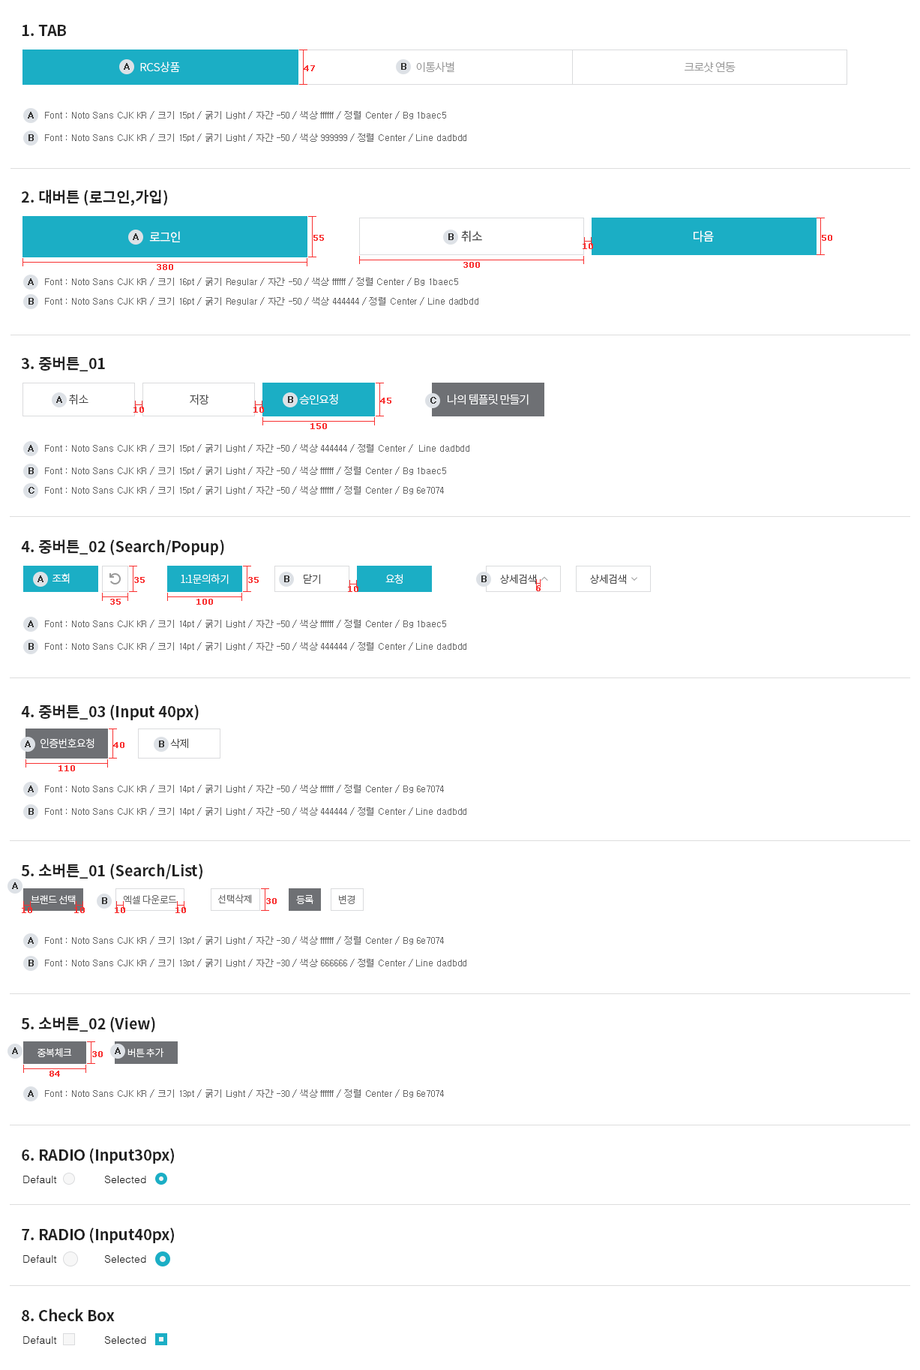
<style>
.page{position:relative;width:920px;height:1370px;background:#ffffff}
.page>*{position:absolute;margin:0}
.t1{font:15px "NotoSansCJKkr-Bold";color:#222222;text-transform:uppercase}
.t2{font:11.3px "NotoSansCJKkr-Light";color:#ffffff}
.t3{font:11.3px "NotoSansCJKkr-Light";letter-spacing:-0.05em;color:#ffffff}
.t4{font:8.3px "Verdana";color:#f83030;font-weight:bold}
.t5{font:11.3px "NotoSansCJKkr-Light";letter-spacing:-0.05em;color:#999999}
.t6{font:9px "Dotum";color:#323232;font-weight:bold}
.t7{font:9px "Dotum";color:#666666}
.t8{font:12px "NotoSansCJKkr-Regular";letter-spacing:-0.05em;color:#ffffff;text-transform:uppercase}
.t9{font:12px "NotoSansCJKkr-Regular";letter-spacing:-0.05em;color:#444444;text-transform:uppercase}
.t10{font:11.3px "NotoSansCJKkr-Light";letter-spacing:-0.05em;color:#444444}
.t11{font:15px "NotoSansCJKkr-Bold";color:#222222}
.t12{font:10.5px "NotoSansCJKkr-Light";letter-spacing:-0.05em;color:#ffffff}
.t13{font:10.5px "NotoSansCJKkr-Light";letter-spacing:-0.05em;color:#444444;text-transform:uppercase}
.t14{font:10.5px "NotoSansCJKkr-Light";letter-spacing:-0.05em;color:#ffffff;text-transform:uppercase}
.t15{font:10.5px "NotoSansCJKkr-Light";letter-spacing:-0.03em;color:#444444}
.t16{font:10.5px "NotoSansCJKkr-Light";letter-spacing:-0.05em;color:#444444}
.t17{font:9.8px "NotoSansCJKkr-Light";letter-spacing:-0.03em;color:#666666}
.t18{font:9.8px "NotoSansCJKkr-Light";letter-spacing:-0.03em;color:#ffffff}
.t19{font:10.5px "Dotum";color:#222222}
</style>
<div class="page">
<p class="t1" style="left:22px;top:25px;width:44px;height:11px">1. TAB</p>
<p class="t2" style="left:140px;top:62px;width:40px;height:10px">RCS<span class="t3">상품</span></p>
<p class="t4" style="left:304px;top:65px;width:11px;height:6px">47</p>
<p class="t5" style="left:416px;top:62px;width:39px;height:10px">이통사별</p>
<p class="t5" style="left:685px;top:62px;width:51px;height:10px">크로샷 연동</p>
<p class="t6" style="left:28px;top:112px;width:6px;height:7px">A</p>
<p class="t7" style="left:45px;top:111px;width:401px;height:8px">Font : Noto Sans CJK KR / 크기 15pt / 굵기 Light / 자간 -50 / 색상 ffffff / 정렬 Center / Bg 1baec5</p>
<p class="t6" style="left:29px;top:134px;width:5px;height:7px">B</p>
<p class="t7" style="left:45px;top:134px;width:422px;height:8px">Font : Noto Sans CJK KR / 크기 15pt / 굵기 Light / 자간 -50 / 색상 999999 / 정렬 Center / Line dadbdd</p>
<p class="t1" style="left:21px;top:189px;width:146px;height:17px">2. 대버튼 (로그인,가입)</p>
<p class="t8" style="left:149px;top:231px;width:31px;height:11px">로그인</p>
<p class="t9" style="left:461px;top:230px;width:21px;height:12px">취소</p>
<p class="t8" style="left:694px;top:230px;width:20px;height:12px">다음</p>
<p class="t4" style="left:314px;top:235px;width:10px;height:6px">55</p>
<p class="t4" style="left:583px;top:243px;width:10px;height:6px">10</p>
<p class="t4" style="left:822px;top:235px;width:11px;height:6px">50</p>
<p class="t4" style="left:157px;top:264px;width:16px;height:6px">380</p>
<p class="t4" style="left:464px;top:262px;width:16px;height:6px">300</p>
<p class="t6" style="left:28px;top:278px;width:6px;height:7px">A</p>
<p class="t7" style="left:45px;top:278px;width:413px;height:8px">Font : Noto Sans CJK KR / 크기 16pt / 굵기 Regular / 자간 -50 / 색상 ffffff / 정렬 Center / Bg 1baec5</p>
<p class="t6" style="left:29px;top:298px;width:5px;height:7px">B</p>
<p class="t7" style="left:45px;top:297px;width:434px;height:8px">Font : Noto Sans CJK KR / 크기 16pt / 굵기 Regular / 자간 -50 / 색상 444444 / 정렬 Center / Line dadbdd</p>
<p class="t1" style="left:21px;top:356px;width:84px;height:15px">3. 중버튼_01</p>
<p class="t10" style="left:69px;top:394px;width:20px;height:10px">취소</p>
<p class="t10" style="left:190px;top:394px;width:19px;height:11px">저장</p>
<p class="t3" style="left:299px;top:394px;width:39px;height:10px">승인요청</p>
<p class="t4" style="left:380px;top:398px;width:12px;height:6px">45</p>
<p class="t3" style="left:448px;top:394px;width:81px;height:11px">나의 템플릿 만들기</p>
<p class="t4" style="left:134px;top:407px;width:10px;height:6px">10</p>
<p class="t4" style="left:254px;top:407px;width:10px;height:6px">10</p>
<p class="t4" style="left:311px;top:423px;width:16px;height:6px">150</p>
<p class="t6" style="left:28px;top:445px;width:6px;height:7px">A</p>
<p class="t7" style="left:45px;top:444px;width:425px;height:8px">Font : Noto Sans CJK KR / 크기 15pt / 굵기 Light / 자간 -50 / 색상 444444 / 정렬 Center /  Line dadbdd</p>
<p class="t6" style="left:29px;top:467px;width:5px;height:7px">B</p>
<p class="t7" style="left:45px;top:467px;width:401px;height:8px">Font : Noto Sans CJK KR / 크기 15pt / 굵기 Light / 자간 -50 / 색상 ffffff / 정렬 Center / Bg 1baec5</p>
<p class="t6" style="left:29px;top:487px;width:6px;height:7px">C</p>
<p class="t7" style="left:45px;top:486px;width:399px;height:8px">Font : Noto Sans CJK KR / 크기 15pt / 굵기 Light / 자간 -50 / 색상 ffffff / 정렬 Center / Bg 6e7074</p>
<p class="t1" style="left:21px;top:539px;width:203px;height:16px">4. 중버튼_02 (S<span class="t11">earch/Popup)</span></p>
<p class="t12" style="left:53px;top:573px;width:17px;height:11px">조회</p>
<p class="t4" style="left:134px;top:577px;width:11px;height:6px">35</p>
<p class="t12" style="left:181px;top:574px;width:48px;height:10px">1:1문의하기</p>
<p class="t4" style="left:248px;top:577px;width:11px;height:6px">35</p>
<p class="t13" style="left:304px;top:574px;width:16px;height:10px">닫기</p>
<p class="t14" style="left:386px;top:574px;width:17px;height:10px">요청</p>
<p class="t15" style="left:500px;top:574px;width:36px;height:10px">상세검색</p>
<p class="t15" style="left:590px;top:574px;width:36px;height:10px">상세검색</p>
<p class="t4" style="left:348px;top:586px;width:11px;height:6px">10</p>
<p class="t4" style="left:536px;top:585px;width:5px;height:6px">6</p>
<p class="t4" style="left:110px;top:599px;width:11px;height:6px">35</p>
<p class="t4" style="left:197px;top:599px;width:16px;height:6px">100</p>
<p class="t6" style="left:28px;top:620px;width:6px;height:7px">A</p>
<p class="t7" style="left:45px;top:620px;width:401px;height:8px">Font : Noto Sans CJK KR / 크기 14pt / 굵기 Light / 자간 -50 / 색상 ffffff / 정렬 Center / Bg 1baec5</p>
<p class="t6" style="left:29px;top:643px;width:5px;height:7px">B</p>
<p class="t7" style="left:45px;top:642px;width:422px;height:8px">Font : Noto Sans CJK KR / 크기 14pt / 굵기 Light / 자간 -50 / 색상 444444 / 정렬 Center / Line dadbdd</p>
<p class="t1" style="left:21px;top:704px;width:178px;height:16px">4. 중버튼_03 (i<span class="t11">nput 40px)</span></p>
<p class="t12" style="left:41px;top:738px;width:54px;height:10px">인증번호요청</p>
<p class="t4" style="left:113px;top:742px;width:12px;height:6px">40</p>
<p class="t16" style="left:170px;top:738px;width:18px;height:11px">삭제</p>
<p class="t4" style="left:59px;top:765px;width:16px;height:6px">110</p>
<p class="t6" style="left:28px;top:785px;width:6px;height:7px">A</p>
<p class="t7" style="left:45px;top:785px;width:399px;height:8px">Font : Noto Sans CJK KR / 크기 14pt / 굵기 Light / 자간 -50 / 색상 ffffff / 정렬 Center / Bg 6e7074</p>
<p class="t6" style="left:29px;top:808px;width:5px;height:7px">B</p>
<p class="t7" style="left:45px;top:807px;width:422px;height:8px">Font : Noto Sans CJK KR / 크기 14pt / 굵기 Light / 자간 -50 / 색상 444444 / 정렬 Center / Line dadbdd</p>
<p class="t11" style="left:21px;top:863px;width:182px;height:16px">5. 소버튼_01 (Search/List)</p>
<p class="t17" style="left:218px;top:893px;width:34px;height:11px">선택삭제</p>
<p class="t18" style="left:31px;top:895px;width:45px;height:10px">브랜드 선택</p>
<p class="t17" style="left:123px;top:895px;width:54px;height:10px">엑셀 다운로드</p>
<p class="t4" style="left:266px;top:898px;width:11px;height:6px">30</p>
<p class="t18" style="left:296px;top:895px;width:18px;height:9px">등록</p>
<p class="t17" style="left:339px;top:894px;width:16px;height:10px">변경</p>
<p class="t4" style="left:74px;top:907px;width:11px;height:6px">10</p>
<p class="t6" style="left:28px;top:937px;width:6px;height:7px">A</p>
<p class="t7" style="left:45px;top:936px;width:399px;height:8px">Font : Noto Sans CJK KR / 크기 13pt / 굵기 Light / 자간 -30 / 색상 ffffff / 정렬 Center / Bg 6e7074</p>
<p class="t6" style="left:29px;top:959px;width:5px;height:7px">B</p>
<p class="t7" style="left:45px;top:959px;width:422px;height:8px">Font : Noto Sans CJK KR / 크기 13pt / 굵기 Light / 자간 -30 / 색상 666666 / 정렬 Center / Line dadbdd</p>
<p class="t11" style="left:21px;top:1016px;width:134px;height:16px">5. 소버튼_02 (View)</p>
<p class="t18" style="left:38px;top:1047px;width:34px;height:11px">중복체크</p>
<p class="t18" style="left:128px;top:1047px;width:36px;height:11px">버튼 추가</p>
<p class="t4" style="left:92px;top:1051px;width:11px;height:6px">30</p>
<p class="t4" style="left:50px;top:1070px;width:10px;height:6px">84</p>
<p class="t6" style="left:28px;top:1090px;width:6px;height:7px">A</p>
<p class="t7" style="left:45px;top:1089px;width:399px;height:8px">Font : Noto Sans CJK KR / 크기 13pt / 굵기 Light / 자간 -30 / 색상 ffffff / 정렬 Center / Bg 6e7074</p>
<p class="t1" style="left:22px;top:1148px;width:152px;height:15px">6. Radio (I<span class="t11">nput30px)</span></p>
<p class="t19" style="left:23px;top:1175px;width:34px;height:8px">Default</p>
<p class="t19" style="left:104px;top:1175px;width:42px;height:8px">Selected</p>
<p class="t1" style="left:22px;top:1227px;width:152px;height:16px">7. Radio (I<span class="t11">nput40px)</span></p>
<p class="t19" style="left:23px;top:1255px;width:34px;height:7px">Default</p>
<p class="t19" style="left:104px;top:1255px;width:42px;height:7px">Selected</p>
<p class="t11" style="left:22px;top:1308px;width:93px;height:13px"><span class="t1">8. C</span>heck Box</p>
<p class="t19" style="left:23px;top:1336px;width:34px;height:7px">Default</p>
<p class="t19" style="left:104px;top:1336px;width:42px;height:7px">Selected</p>
</div>
